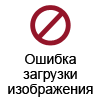
<style>
.page{position:relative;width:100px;height:100px;background:#ffffff}
.page>*{position:absolute;margin:0}
.t1{font:14px/0px "ArialMT";color:#000000}
</style>
<div class="page">
<p class="t1" style="left:8px;top:54px;width:85px;height:43px;text-align:center">Ошибка<br>загрузки<br>изображения</p>
</div>
